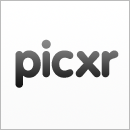
<style>
.page{position:relative;width:130px;height:130px}
.page>*{position:absolute;margin:0}
.t1{font:48px "VAGRoundedBlackSSiBlack";letter-spacing:-0.01em}
.t2{font:48px "VAGRoundedBlackSSiBlack";letter-spacing:0.05em}
.t3{font:48px "VAGRoundedBlackSSiBlack";letter-spacing:0.005em}
.t4{font:48px "VAGRoundedBlackSSiBlack";letter-spacing:-0.025em}
</style>
<div class="page">
<p class="t1" style="left:15px;top:39px;width:104px;height:49px">pi<span class="t2">c</span><span class="t3">x</span><span class="t4">r</span></p>
</div>
